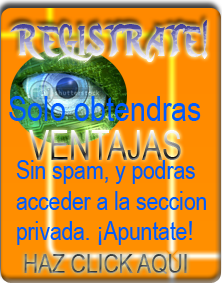
<style>
.page{position:relative;width:222px;height:288px}
.page>*{position:absolute;margin:0}
.t1{font:41.1px "DarkCrystalScript";scale:0.65 1}
.t2{font:35.1px "ArialNarrow";color:#005bff}
.t3{font:41.9px "ArialNarrow";scale:0.88 1}
.t4{font:25.6px "ArialNarrow";color:#005bff}
.t5{font:25.6px "ArialNarrow"}
</style>
<div class="page">
<p class="t1" style="left:10px;top:20px;width:198px;height:43px">REGISTRATE!</p>
<p class="t2" style="left:9px;top:96px;width:192px;height:25px">Solo obtendras</p>
<p class="t3" style="left:29px;top:130px;width:152px;height:30px">VENTAJAS</p>
<p class="t4" style="left:16px;top:160px;width:190px;height:85px">Sin spam, y podras<br>acceder a la seccion<br>privada. ¡Apuntate!</p>
<p class="t5" style="left:24px;top:254px;width:163px;height:20px">HAZ CLICK AQUI</p>
</div>
